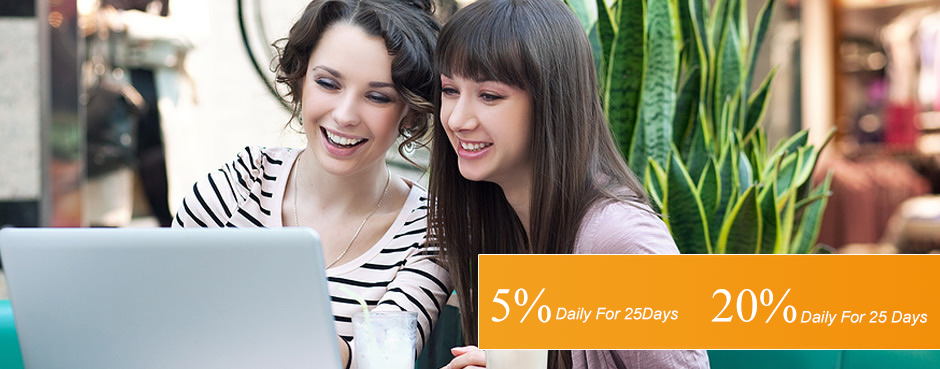
<style>
.page{position:relative;width:940px;height:369px}
.page>*{position:absolute;margin:0}
.t1{font:48px "TimesNewRomanPSMT";color:#ffffff}
.t2{font:16px "Arial-ItalicMT";color:#ffffff}
</style>
<div class="page">
<p class="t1" style="left:491px;top:288px;width:60px;height:35px">5%</p>
<p class="t1" style="left:711px;top:288px;width:86px;height:35px">20%</p>
<p class="t2" style="left:556px;top:307px;width:122px;height:16px">Daily For 25Days</p>
<p class="t2" style="left:800px;top:311px;width:128px;height:15px">Daily For 25 Days</p>
</div>
